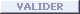
<style>
.page{position:relative;width:80px;height:14px;background:#e9eff8}
.page>*{position:absolute;margin:0}
.t1{font:10px "Tahoma-Bold";color:#9694b2;text-transform:uppercase}
</style>
<div class="page">
<p class="t1" style="left:17px;top:3px;width:46px;height:7px">Valider</p>
</div>
